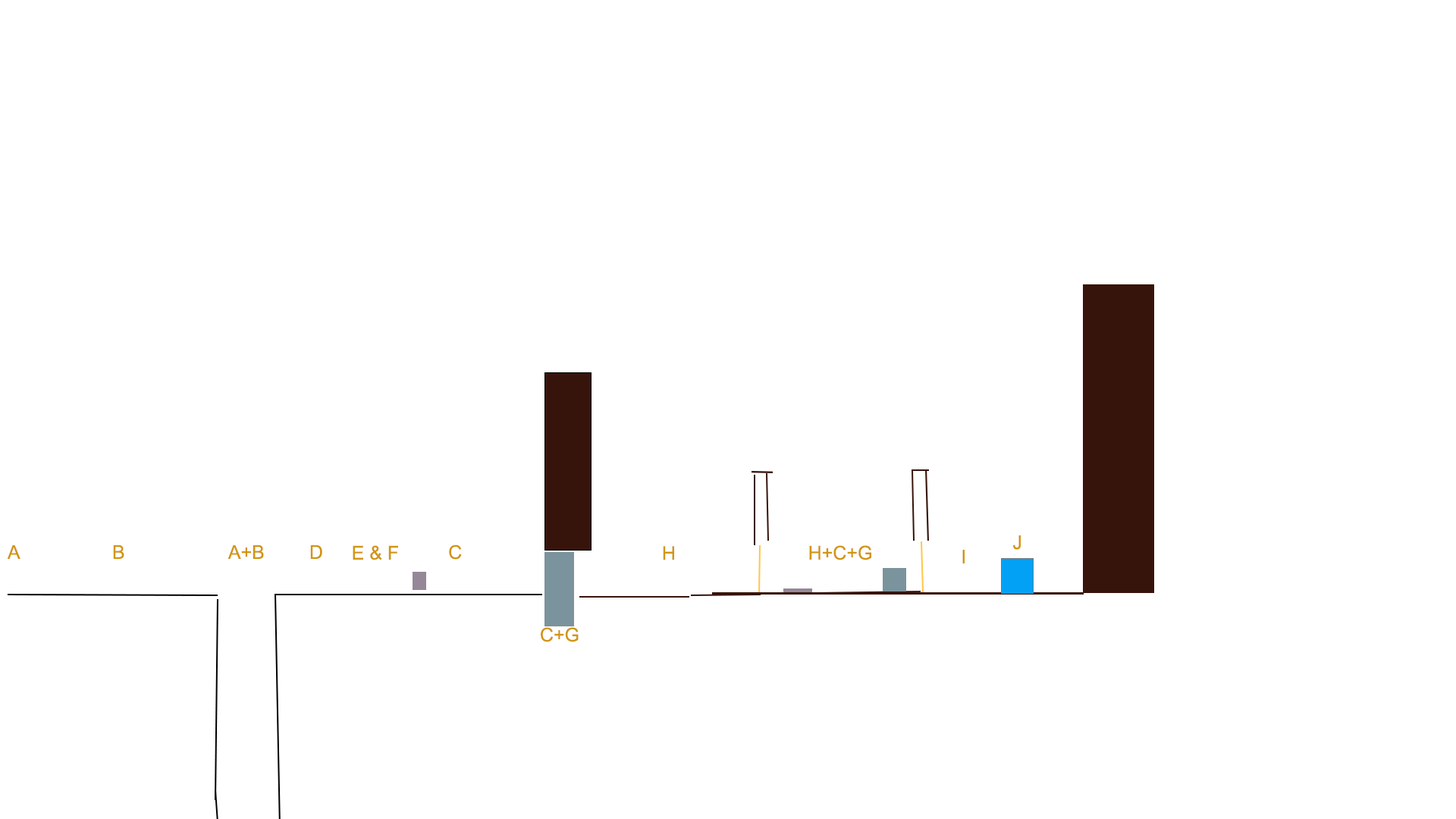
<style>
.page{position:relative;width:1456px;height:819px;background:#ffffff}
.page>*{position:absolute;margin:0}
.t1{font:19px "ArialMT";color:#d29512}
</style>
<div class="page">
<p class="t1" style="left:7px;top:545px;width:13px;height:14px">A</p>
<p class="t1" style="left:113px;top:545px;width:11px;height:14px">B</p>
<p class="t1" style="left:227px;top:545px;width:37px;height:14px">A+B</p>
<p class="t1" style="left:310px;top:545px;width:12px;height:14px">D</p>
<p class="t1" style="left:353px;top:545px;width:45px;height:15px">E &amp; F</p>
<p class="t1" style="left:449px;top:544px;width:13px;height:16px">C</p>
<p class="t1" style="left:663px;top:546px;width:11px;height:14px">H</p>
<p class="t1" style="left:809px;top:545px;width:62px;height:15px">H+C+G</p>
<p class="t1" style="left:1013px;top:535px;width:8px;height:15px">J</p>
<p class="t1" style="left:962px;top:550px;width:3px;height:13px">I</p>
<p class="t1" style="left:541px;top:627px;width:38px;height:15px">C+G</p>
</div>
